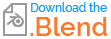
<style>
.page{position:relative;width:111px;height:39px;background:#ffffff}
.page>*{position:absolute;margin:0}
.t1{font:12.3px "Raleway-Medium";color:#109df0;scale:0.95 1}
.t2{font:26.1px "Raleway-SemiBold";color:#ff782a}
</style>
<div class="page">
<p class="t1" style="left:31px;top:2px;width:76px;height:10px">Download the</p>
<p class="t2" style="left:30px;top:17px;width:77px;height:19px">.Blend</p>
</div>
